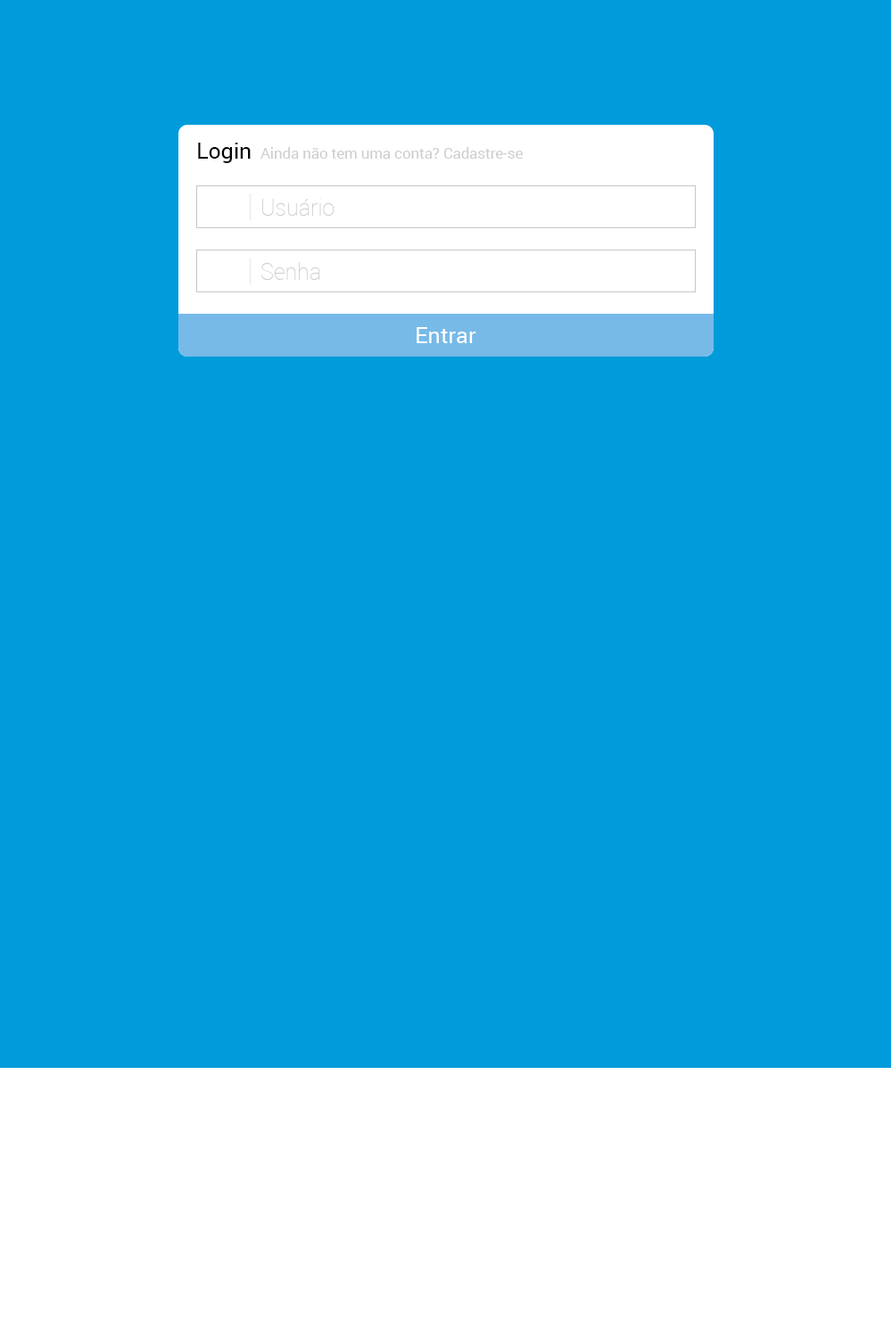
<style>
.page{position:relative;width:892px;height:1337px;background:#009bdb}
.page>*{position:absolute;margin:0}
.t1{font:22.3px "Roboto-Regular";color:#010101}
.t2{font:14.9px "Roboto-Regular";color:#cecece}
.t3{font:22.3px "Roboto-Thin";color:#cecece}
.t4{font:22.3px "Roboto-Regular";color:#ffffff}
</style>
<div class="page">
<p class="t1" style="left:198px;top:143px;width:53px;height:20px">Login</p>
<p class="t2" style="left:260px;top:147px;width:262px;height:12px">Ainda não tem uma conta? Cadastre-se</p>
<p class="t3" style="left:262px;top:198px;width:72px;height:18px">Usuário</p>
<p class="t3" style="left:261px;top:262px;width:59px;height:18px">Senha</p>
<p class="t4" style="left:416px;top:327px;width:60px;height:16px">Entrar</p>
</div>
